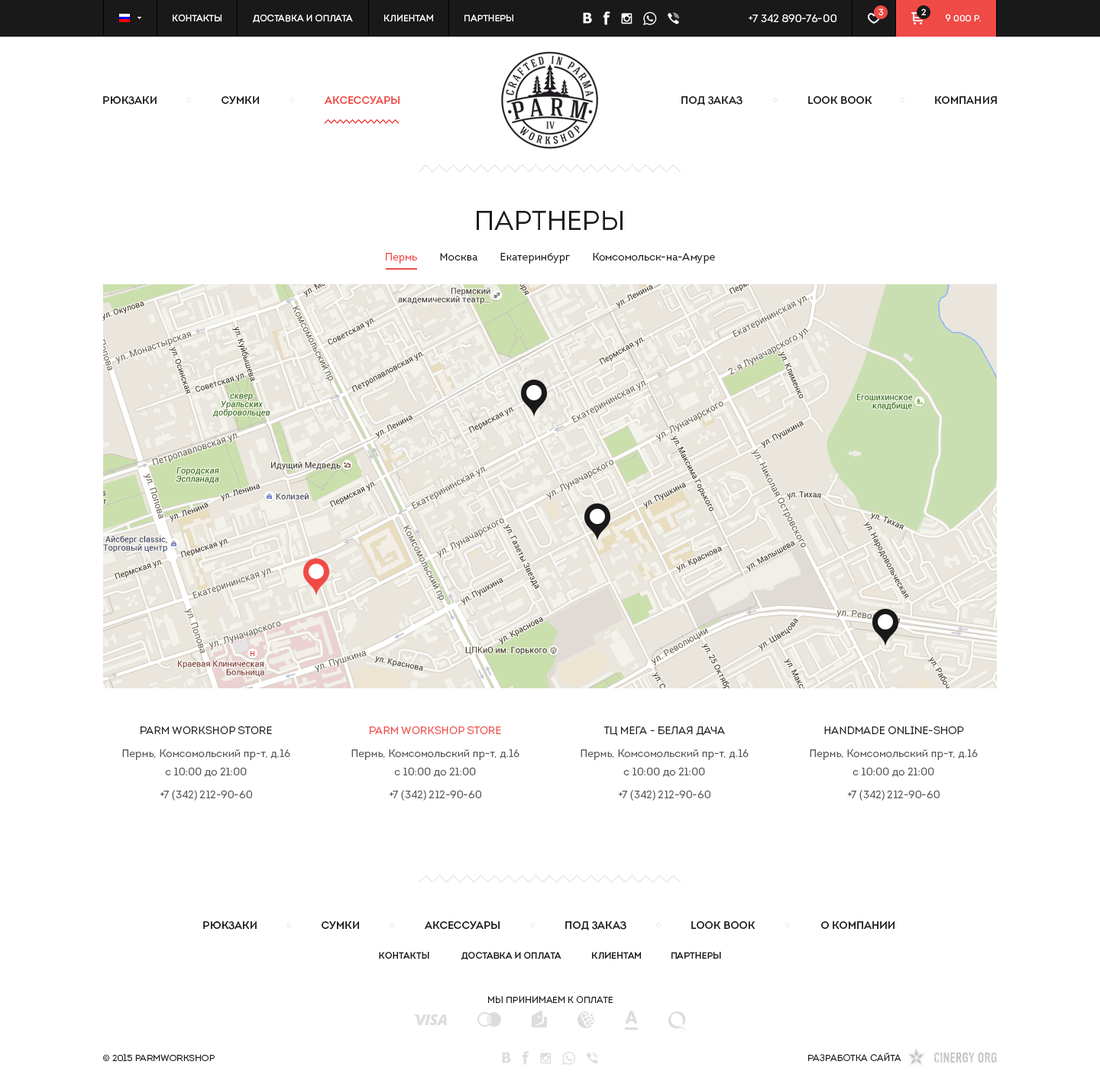
<style>
.page{position:relative;width:1100px;height:1084px;background:#ffffff}
.page>*{position:absolute;margin:0}
.t1{font:9.2px "Intro-Book";color:#ffffff;text-transform:uppercase}
.t2{font:10.7px "Intro-Book";color:#ffffff;text-transform:uppercase}
.t3{font:9.2px "Intro-Book";letter-spacing:0.1em;color:#ffffff;text-transform:uppercase}
.t4{font:10.7px "Intro-Regular";color:#1f1b20;text-transform:uppercase}
.t5{font:10.7px "Intro-Regular";color:#ef4a46;text-transform:uppercase}
.t6{font:27.5px "Intro-Book";color:#1f1b20;text-transform:uppercase}
.t7{font:10.7px "Intro-Book";color:#191919}
.t8{font:10.7px "Intro-Book";color:#ef4a46}
.t9{font:10.7px/22.9px "Intro-Book";color:#555555}
.t10{font:10.7px/22.9px "Intro-Book";color:#1f1b20;text-transform:uppercase}
.t11{font:10.7px/18.3px "Intro-Book";color:#555555}
.t12{font:10.7px/22.9px "Intro-Book";color:#ef4a46;text-transform:uppercase}
.t13{font:9.2px "Intro-Regular";color:#1f1b20;text-transform:uppercase}
.t14{font:9.2px "Intro-Book";color:#1f1b20;text-transform:uppercase}
</style>
<div class="page">
<p class="t1" style="left:173px;top:15px;width:49px;height:6px">Контакты</p>
<p class="t1" style="left:253px;top:15px;width:100px;height:8px">Доставка и оплата</p>
<p class="t1" style="left:384px;top:15px;width:49px;height:6px">Клиентам</p>
<p class="t1" style="left:464px;top:15px;width:49px;height:6px">Партнеры</p>
<p class="t2" style="left:749px;top:14px;width:87px;height:8px">+7 342 890-76-00</p>
<p class="t3" style="left:879px;top:8px;width:5px;height:7px">3</p>
<p class="t3" style="left:921px;top:8px;width:5px;height:7px">2</p>
<p class="t1" style="left:946px;top:14px;width:35px;height:7px">9 000 р.</p>
<p class="t4" style="left:103px;top:95px;width:54px;height:10px">Рюкзаки</p>
<p class="t4" style="left:222px;top:95px;width:37px;height:10px">Сумки</p>
<p class="t5" style="left:324px;top:95px;width:76px;height:10px">Аксессуары</p>
<p class="t4" style="left:681px;top:95px;width:62px;height:10px">Под заказ</p>
<p class="t4" style="left:808px;top:95px;width:64px;height:9px">Look Book</p>
<p class="t4" style="left:935px;top:95px;width:62px;height:9px">Компания</p>
<p class="t6" style="left:477px;top:211px;width:146px;height:19px">Партнеры</p>
<p class="t7" style="left:386px;top:252px;width:329px;height:12px"><span class="t8">Пермь</span>        Москва        Екатеринбург        Комсомольск-на-Амуре</p>
<p class="t9" style="left:122px;top:726px;width:168px;height:75px;text-align:center"><span class="t10">Parm Workshop Store<br></span>Пермь, Комсомольский пр-т, д.16<br><span class="t11">с 10:00 до 21:00<br></span>+7 (342) 212-90-60</p>
<p class="t9" style="left:351px;top:726px;width:168px;height:75px;text-align:center"><span class="t12">Parm Workshop Store<br></span>Пермь, Комсомольский пр-т, д.16<br><span class="t11">с 10:00 до 21:00<br></span>+7 (342) 212-90-60</p>
<p class="t9" style="left:810px;top:726px;width:168px;height:75px;text-align:center"><span class="t10">Handmade Online-shop<br></span>Пермь, Комсомольский пр-т, д.16<br><span class="t11">с 10:00 до 21:00<br></span>+7 (342) 212-90-60</p>
<p class="t9" style="left:581px;top:726px;width:168px;height:75px;text-align:center"><span class="t10">ТЦ МЕГА - Белая дача<br></span>Пермь, Комсомольский пр-т, д.16<br><span class="t11">с 10:00 до 21:00<br></span>+7 (342) 212-90-60</p>
<p class="t4" style="left:203px;top:921px;width:54px;height:9px">Рюкзаки</p>
<p class="t4" style="left:322px;top:921px;width:37px;height:9px">Сумки</p>
<p class="t4" style="left:424px;top:921px;width:76px;height:9px">Аксессуары</p>
<p class="t4" style="left:565px;top:921px;width:61px;height:9px">Под заказ</p>
<p class="t4" style="left:691px;top:921px;width:65px;height:8px">Look Book</p>
<p class="t4" style="left:821px;top:921px;width:74px;height:8px">О компании</p>
<p class="t13" style="left:379px;top:952px;width:50px;height:7px">Контакты</p>
<p class="t13" style="left:461px;top:952px;width:100px;height:8px">Доставка и оплата</p>
<p class="t13" style="left:592px;top:952px;width:49px;height:7px">Клиентам</p>
<p class="t13" style="left:671px;top:952px;width:50px;height:7px">Партнеры</p>
<p class="t14" style="left:488px;top:996px;width:125px;height:7px">Мы принимаем к оплате</p>
<p class="t14" style="left:103px;top:1054px;width:112px;height:7px">© 2015 ParmWorkShop</p>
<p class="t14" style="left:808px;top:1053px;width:93px;height:8px">Разработка сайта</p>
</div>
